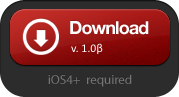
<style>
.page{position:relative;width:179px;height:97px;background:#2c2c2c}
.page>*{position:absolute;margin:0}
.t1{font:18px "HelveticaNeue-Bold";letter-spacing:-0.05em;color:#ffffff}
.t2{font:12px "Calibri";color:#ffffff}
.t3{font:13px "MyriadPro-Regular";color:#757575}
</style>
<div class="page">
<p class="t1" style="left:70px;top:21px;width:79px;height:14px">Download</p>
<p class="t2" style="left:71px;top:43px;width:32px;height:11px">v. 1.0β</p>
<p class="t3" style="left:48px;top:74px;width:84px;height:13px">iOS4+  required</p>
</div>
